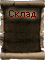
<style>
.page{position:relative;width:45px;height:60px}
.page>*{position:absolute;margin:0}
.t1{font:9px "MicrosoftSansSerif";color:#570000}
</style>
<div class="page">
<p class="t1" style="left:9px;top:10px;width:27px;height:8px">Склад</p>
</div>
